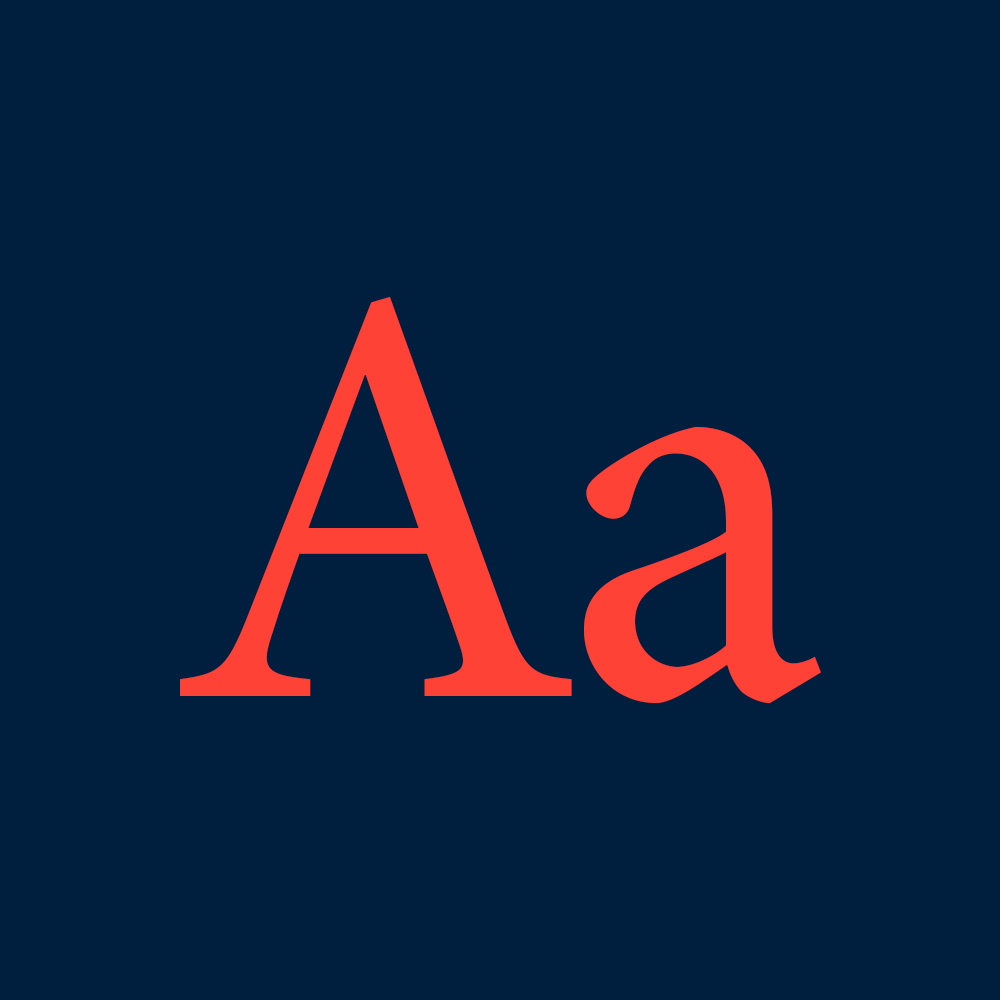
<style>
.page{position:relative;width:1000px;height:1000px;background:#001f3f}
.page>*{position:absolute;margin:0}
.t1{font:600px "MinionPro-Regular";letter-spacing:-0.025em;color:#ff4136}
</style>
<div class="page">
<p class="t1" style="left:180px;top:297px;width:641px;height:406px">Aa</p>
</div>
